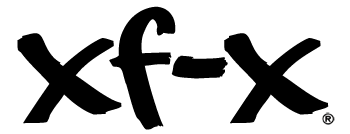
<style>
.page{position:relative;width:350px;height:134px;background:#ffffff}
.page>*{position:absolute;margin:0}
.t1{font:140.7px "aaaiight!";letter-spacing:0.008em;color:#000000;scale:0.95 1}
</style>
<div class="page">
<p class="t1" style="left:17px;top:6px;width:312px;height:124px">xf-x</p>
</div>
